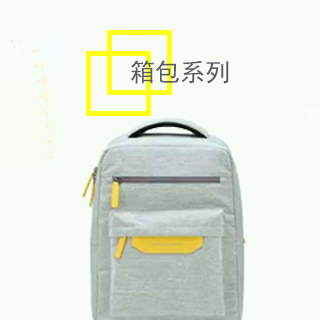
<style>
.page{position:relative;width:320px;height:320px;background:#f7fcf6}
.page>*{position:absolute;margin:0}
.t1{font:25px "SimHei";color:#585c5f}
</style>
<div class="page">
<p class="t1" style="left:131px;top:60px;width:98px;height:24px">箱包系列</p>
</div>
